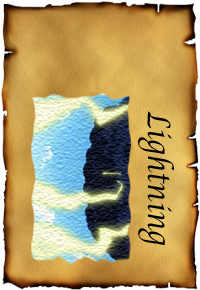
<style>
.page{position:relative;width:200px;height:290px}
.page>*{position:absolute;margin:0}
.t1{font:30.5px "LucidaCalligraphy-Italic";color:#000000;scale:0.85 1}
</style>
<div class="page">
<p class="t1" style="left:138px;top:111px;width:36px;height:135px;rotate:90deg">Lightning</p>
</div>
